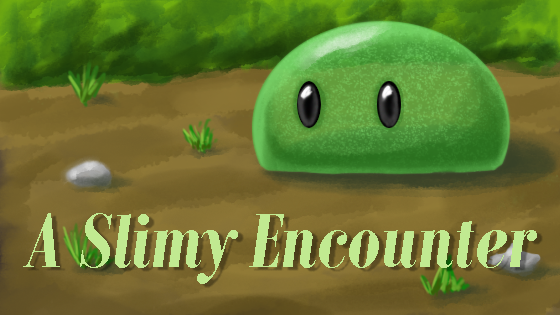
<style>
.page{position:relative;width:560px;height:315px}
.page>*{position:absolute;margin:0}
.t1{font:83.6px "BodoniMTCondensed-BoldItalic";color:#c1ea91}
</style>
<div class="page">
<p class="t1" style="left:23px;top:213px;width:514px;height:71px">A Slimy Encounter</p>
</div>
